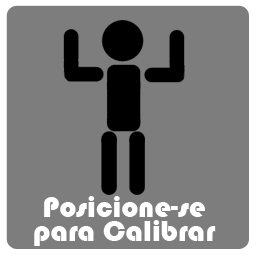
<style>
.page{position:relative;width:256px;height:256px;background:#7d7d7d}
.page>*{position:absolute;margin:0}
.t1{font:30.1px "Bauhaus93";color:#ffffff}
</style>
<div class="page">
<p class="t1" style="left:34px;top:196px;width:182px;height:50px">Posicione-se para Calibrar</p>
</div>
